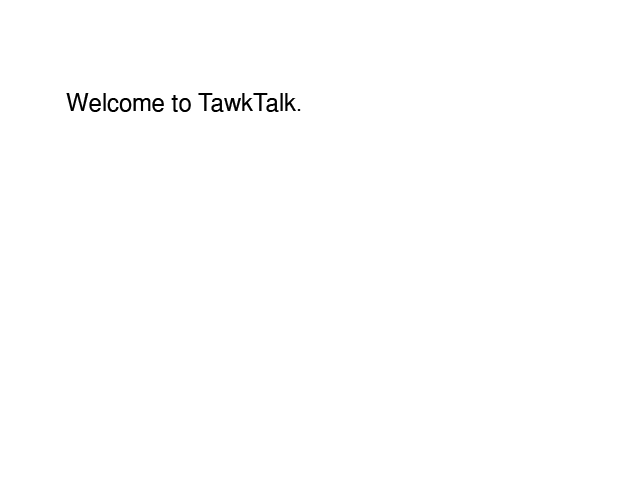
<style>
.page{position:relative;width:640px;height:480px;background:#ffffff}
.page>*{position:absolute;margin:0}
.t1{font:24px "KhmerOS";color:#000000}
.t2{font:24px "TimesNewRomanPSMT";color:#000000}
</style>
<div class="page">
<p class="t1" style="left:66px;top:93px;width:235px;height:19px">Welcome to TawkTalk<span class="t2">.</span></p>
</div>
